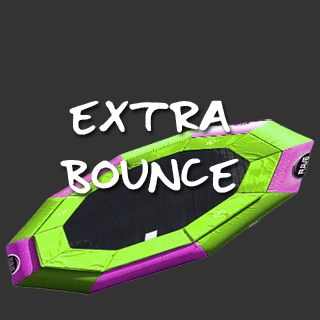
<style>
.page{position:relative;width:320px;height:320px;background:#333333}
.page>*{position:absolute;margin:0}
.t1{font:48px "emilyyyyyy";color:#ffffff}
</style>
<div class="page">
<p class="t1" style="left:60px;top:100px;width:179px;height:94px;text-align:center">EXTRA<br>BOUNCE</p>
</div>
